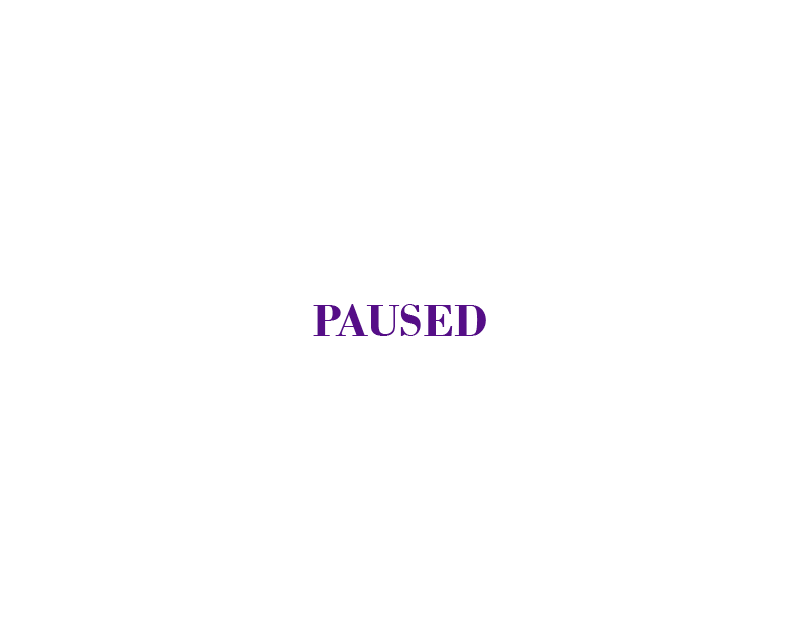
<style>
.page{position:relative;width:800px;height:640px;background:#ffffff}
.page>*{position:absolute;margin:0}
.t1{font:48px "BodoniMT-Bold";color:#550e87}
</style>
<div class="page">
<p class="t1" style="left:313px;top:304px;width:173px;height:32px">PAUSED</p>
</div>
